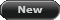
<style>
.page{position:relative;width:60px;height:20px;background:#1a1b1b}
.page>*{position:absolute;margin:0}
.t1{font:10px "Verdana-Bold";color:#d1d1d1}
</style>
<div class="page">
<p class="t1" style="left:18px;top:6px;width:25px;height:7px">New</p>
</div>
